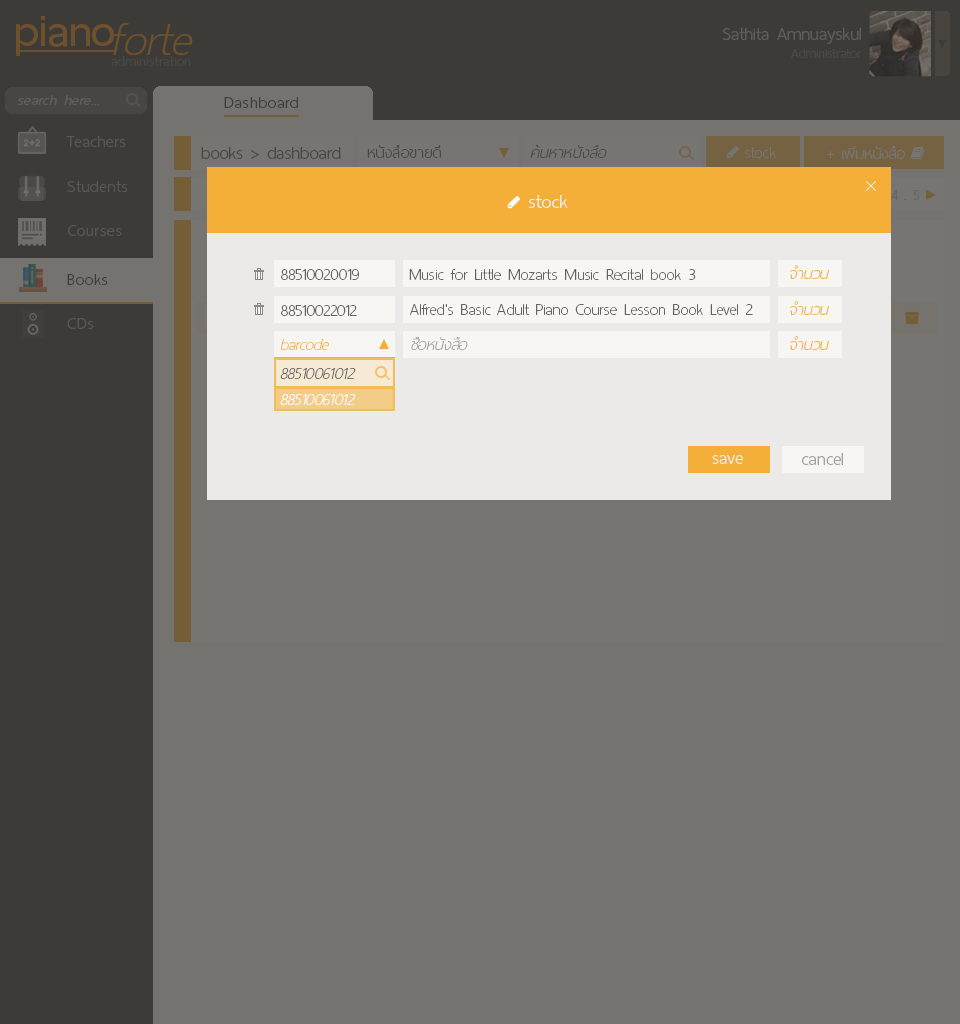
<style>
.page{position:relative;width:960px;height:1024px;background:#75736f}
.page>*{position:absolute;margin:0}
.t1{font:60px "ThaiSansNeue-SemiBold";letter-spacing:-0.005em;color:#6e502c}
.t2{font:62px "ThaiSansNeue-ExtraLightItalic";letter-spacing:-0.005em;color:#6e502c}
.t3{font:24px "ThaiSansNeue-Light";letter-spacing:-0.005em;color:#5f5d5a}
.t4{font:18px "ThaiSansNeue-Light";letter-spacing:-0.005em;color:#4a4843}
.t5{font:18.5px "ThaiSansNeue-ExtraLight";letter-spacing:0.025em;color:#4a4843}
.t6{font:20px "ThaiSansNeue-LightItalic";letter-spacing:0.025em;color:#605e5a}
.t7{font:22px "ThaiSansNeue-Light";letter-spacing:0.025em;color:#3d3b37}
.t8{font:22px "ThaiSansNeue-Light";letter-spacing:0.025em;color:#595754}
.t9{font:24px "ThaiSansNeue-Light";letter-spacing:-0.005em;color:#484744}
.t10{font:22px "ThaiSansNeue-UltraLight";letter-spacing:0.01em;color:#484744}
.t11{font:22px "ThaiSansNeue-UltraLightItalic";letter-spacing:0.01em;color:#484744}
.t12{font:22px "ThaiSansNeue-UltraLight";color:#777572}
.t13{font:26px "ThaiSansNeue-Light";letter-spacing:-0.005em;color:#ebeae8}
.t14{font:22px "ThaiSansNeue-UltraLight";color:#636363}
.t15{font:22px "ThaiSansNeue-UltraLightItalic";color:#f3af37}
.t16{font:22px "ThaiSansNeue-UltraLightItalic";color:#a2a1a0}
.t17{font:22px "ThaiSansNeue-UltraLightItalic";color:#636363}
.t18{font:22px "ThaiSansNeue-UltraLightItalic";color:#ffffff}
.t19{font:24px "ThaiSansNeue-Light";letter-spacing:-0.005em;color:#ebeae8}
.t20{font:24px "ThaiSansNeue-Light";color:#a2a1a0}
</style>
<div class="page">
<p class="t1" style="left:16px;top:16px;width:98px;height:40px">piano</p>
<p class="t2" style="left:113px;top:23px;width:80px;height:32px">forte</p>
<p class="t3" style="left:723px;top:28px;width:138px;height:16px">Sathita Amnuayskul</p>
<p class="t4" style="left:791px;top:49px;width:71px;height:9px">Administrator</p>
<p class="t5" style="left:111px;top:56px;width:80px;height:10px">administration</p>
<p class="t6" style="left:17px;top:95px;width:83px;height:10px">search here...</p>
<p class="t7" style="left:224px;top:97px;width:74px;height:11px">Dashboard</p>
<p class="t8" style="left:66px;top:136px;width:60px;height:11px">Teachers</p>
<p class="t9" style="left:201px;top:147px;width:140px;height:12px">books &gt; dashboard</p>
<p class="t10" style="left:367px;top:145px;width:74px;height:13px">หนังสือขายดี</p>
<p class="t11" style="left:530px;top:145px;width:77px;height:13px">ค้นหาหนังสือ</p>
<p class="t12" style="left:745px;top:147px;width:31px;height:11px">stock</p>
<p class="t12" style="left:827px;top:146px;width:78px;height:13px">+ เพิ่มหนังสือ</p>
<p class="t8" style="left:67px;top:181px;width:61px;height:11px">Students</p>
<p class="t13" style="left:529px;top:195px;width:39px;height:13px">stock</p>
<p class="t8" style="left:68px;top:225px;width:54px;height:11px">Courses</p>
<p class="t14" style="left:281px;top:269px;width:78px;height:11px">88510020019</p>
<p class="t14" style="left:409px;top:269px;width:287px;height:11px">Music for Little Mozarts Music Recital book 3</p>
<p class="t15" style="left:790px;top:265px;width:39px;height:14px">จำนวน</p>
<p class="t7" style="left:67px;top:274px;width:41px;height:11px">Books</p>
<p class="t14" style="left:281px;top:305px;width:76px;height:11px">88510022012</p>
<p class="t14" style="left:410px;top:304px;width:343px;height:11px">Alfred's Basic Adult Piano Course Lesson Book Level 2</p>
<p class="t15" style="left:790px;top:301px;width:39px;height:14px">จำนวน</p>
<p class="t8" style="left:67px;top:318px;width:27px;height:11px">CDs</p>
<p class="t15" style="left:280px;top:339px;width:49px;height:11px">barcode</p>
<p class="t16" style="left:411px;top:337px;width:57px;height:13px">ชื่อหนังสือ</p>
<p class="t15" style="left:790px;top:336px;width:39px;height:14px">จำนวน</p>
<p class="t17" style="left:280px;top:368px;width:76px;height:11px">88510061012</p>
<p class="t18" style="left:280px;top:394px;width:76px;height:11px">88510061012</p>
<p class="t19" style="left:712px;top:455px;width:31px;height:9px">save</p>
<p class="t20" style="left:802px;top:453px;width:41px;height:12px">cancel</p>
</div>
